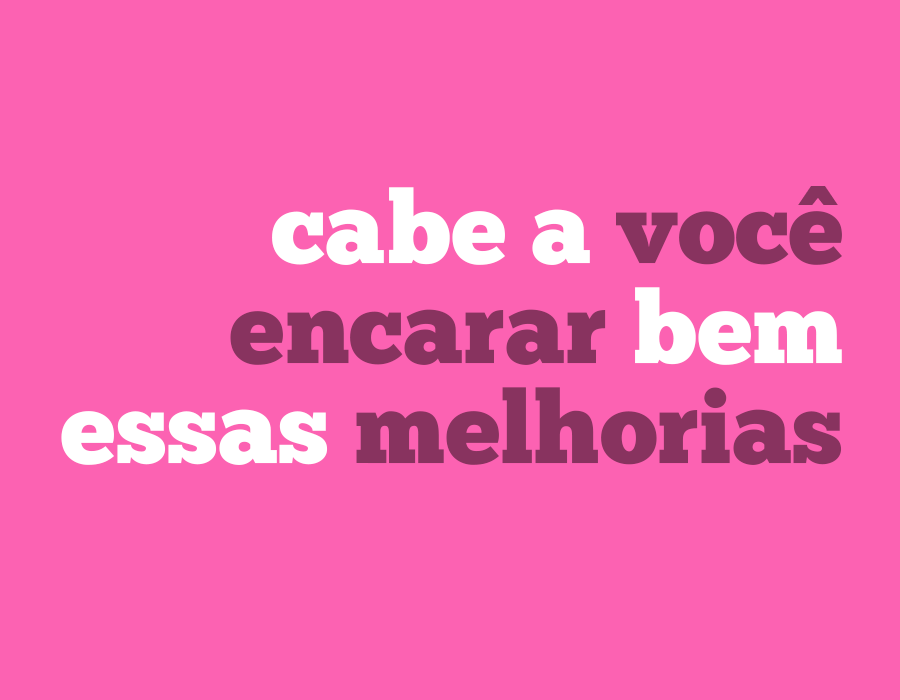
<style>
.page{position:relative;width:900px;height:700px;background:#fc62b2}
.page>*{position:absolute;margin:0}
.t1{font:100.9px/100.3px "ChunkFive-Roman";color:#88335f}
.t2{font:100.9px/100.3px "ChunkFive-Roman";color:#ffffff}
.t3{font:91.9px "GothamUltra";color:#88335f}
</style>
<div class="page">
<p class="t1" style="left:61px;top:187px;width:781px;height:278px;text-align:right"><span class="t2">cabe a </span>voce<br>encarar<span class="t2"> bem<br>essas </span>melhorias</p>
<p class="t3" style="left:798px;top:186px;width:40px;height:19px">^</p>
</div>
